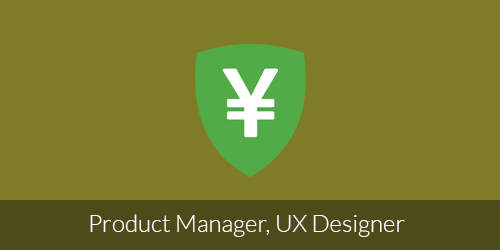
<style>
.page{position:relative;width:500px;height:250px;background:#7f7c25}
.page>*{position:absolute;margin:0}
.t1{font:24px "Lato-Light";color:#ffffff}
</style>
<div class="page">
<p class="t1" style="left:90px;top:214px;width:315px;height:23px">Product Manager, UX Designer</p>
</div>
